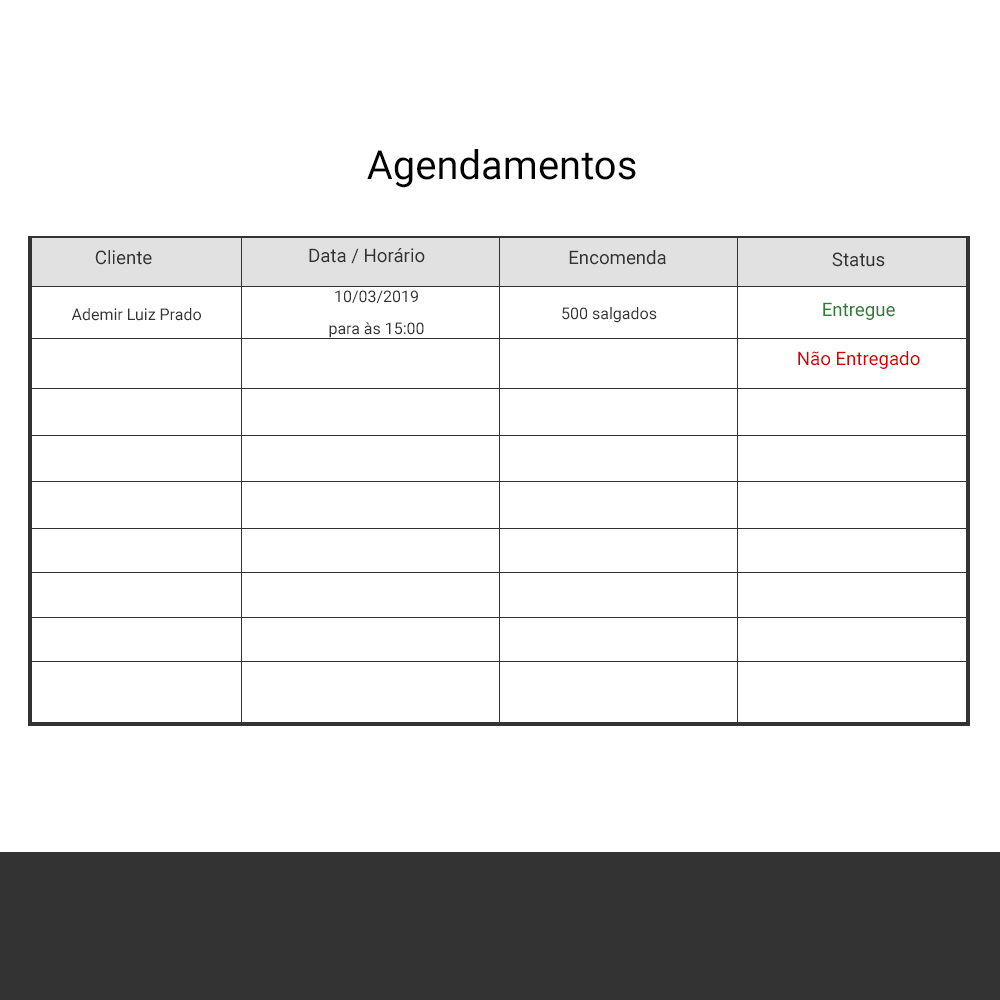
<style>
.page{position:relative;width:1000px;height:1000px;background:#ffffff}
.page>*{position:absolute;margin:0}
.t1{font:40px "Roboto-Regular";color:#000000}
.t2{font:18.7px "Roboto-Regular";color:#333333}
.t3{font:18.7px/32px "Roboto-Regular";color:#333333}
.t4{font:16px/32px "Roboto-Regular";color:#333333}
.t5{font:18.7px "Roboto-Regular";color:#2e7d32}
.t6{font:12px "Roboto-Regular";color:#333333}
.t7{font:18.7px "Roboto-Regular";color:#d50000}
</style>
<div class="page">
<p class="t1" style="left:367px;top:149px;width:269px;height:39px">Agendamentos</p>
<p class="t2" style="left:95px;top:250px;width:57px;height:15px">Cliente</p>
<p class="t3" style="left:309px;top:248px;width:116px;height:16px;text-align:center">Data / Horário<br>/ Horário</p>
<p class="t2" style="left:569px;top:250px;width:97px;height:15px">Encomenda</p>
<p class="t2" style="left:832px;top:252px;width:53px;height:15px">Status</p>
<p class="t4" style="left:329px;top:290px;width:95px;height:48px;text-align:center">10/03/2019 <br>para às 15:00<br><span class="t3"> 1</span></p>
<p class="t5" style="left:823px;top:302px;width:72px;height:18px">Entregue</p>
<p class="t6" style="left:71px;top:308px;width:130px;height:13px">Ademir Luiz Prado</p>
<p class="t6" style="left:562px;top:307px;width:95px;height:16px">500 salgados</p>
<p class="t7" style="left:798px;top:351px;width:122px;height:18px">Não Entregado</p>
</div>
